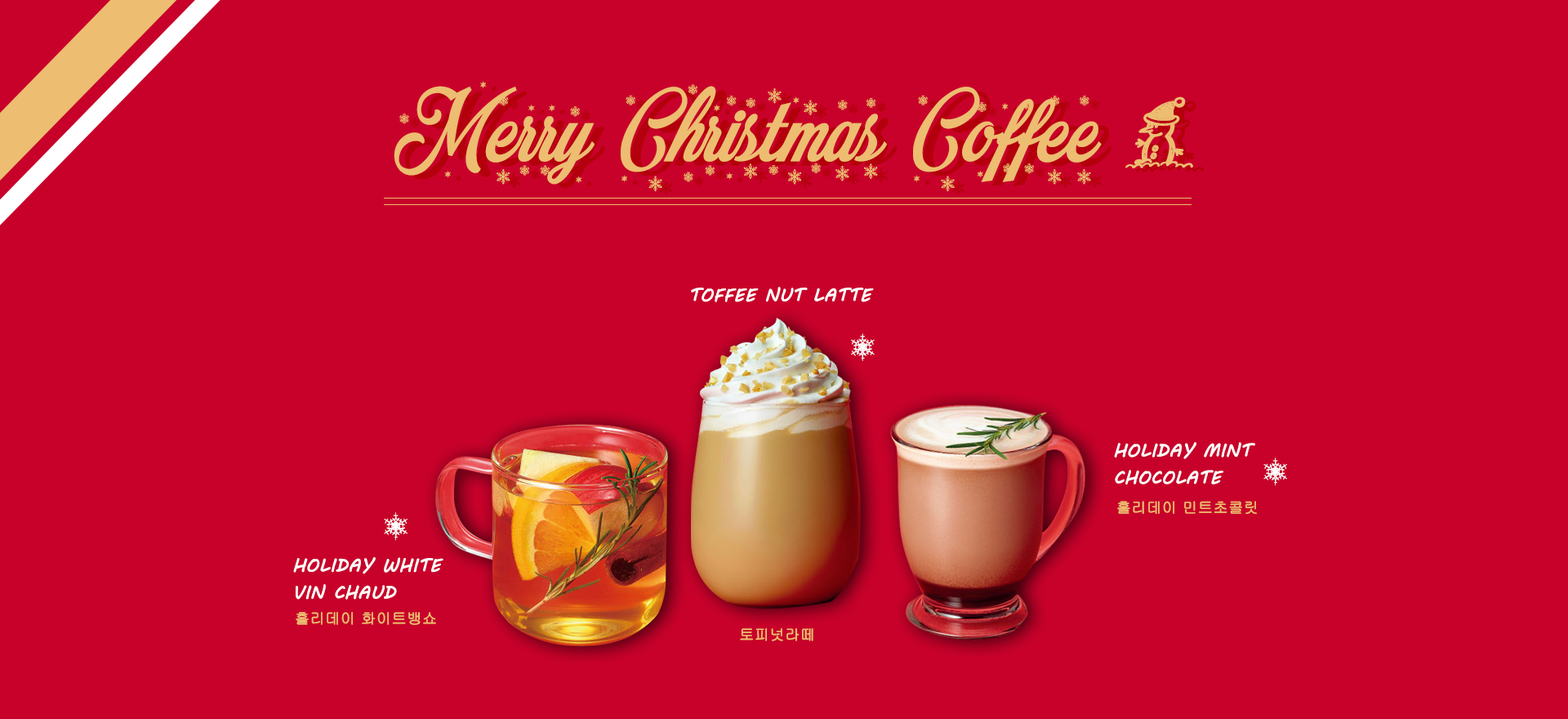
<style>
.page{position:relative;width:1568px;height:719px;background:#c8012a}
.page>*{position:absolute;margin:0}
.t1{font:107.8px "MerryChristmasFlake";color:#edbd71}
.t2{font:107.8px "Miraculous&Christmas";color:#edbd71}
.t3{font:17.6px "MVBoli";color:#ffffff;font-weight:bold}
.t4{font:43.2px "MerryChristmasFlake";color:#ffffff}
.t5{font:17.6px/27px "MVBoli";color:#ffffff;font-weight:bold}
.t6{font:14.9px "Gulim";color:#edbd71;font-weight:bold}
</style>
<div class="page">
<p class="t1" style="left:394px;top:81px;width:799px;height:111px">Merry Christmas Coffee <span class="t2">&amp;</span></p>
<p class="t3" style="left:691px;top:287px;width:183px;height:15px">TOFFEE NUT LATTE</p>
<p class="t4" style="left:851px;top:333px;width:24px;height:28px">6</p>
<p class="t5" style="left:1114px;top:442px;width:141px;height:42px">HOLIDAY MINT<br>CHOCOLATE</p>
<p class="t4" style="left:1263px;top:457px;width:24px;height:29px">6</p>
<p class="t6" style="left:1117px;top:501px;width:140px;height:13px">홀리데이 민트초콜릿</p>
<p class="t4" style="left:384px;top:512px;width:24px;height:29px">6</p>
<p class="t5" style="left:293px;top:557px;width:150px;height:42px">HOLIDAY WHITE<br>VIN CHAUD</p>
<p class="t6" style="left:296px;top:612px;width:140px;height:13px">홀리데이 화이트뱅쇼</p>
<p class="t6" style="left:740px;top:628px;width:73px;height:13px">토피넛라떼</p>
</div>
